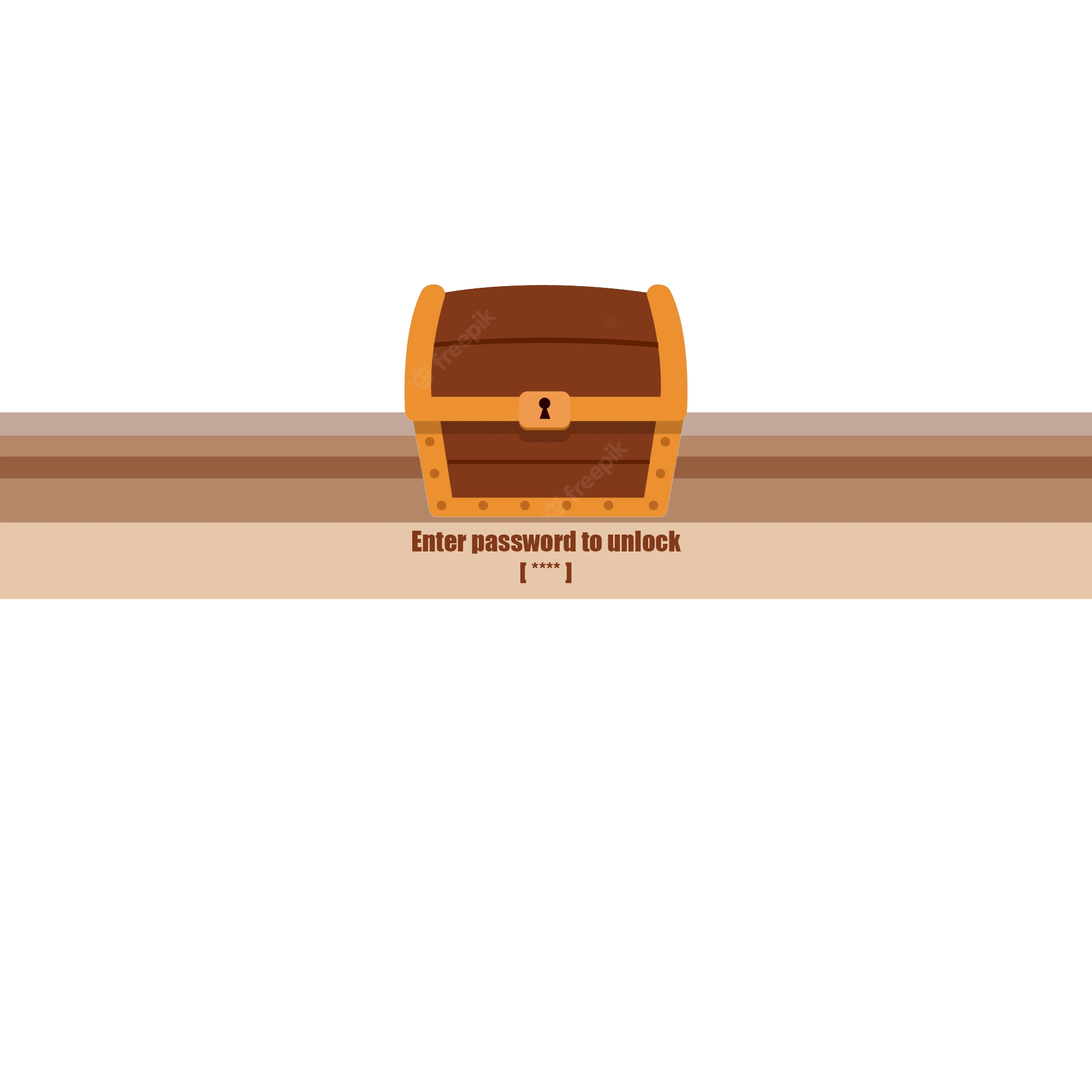
<style>
.page{position:relative;width:1092px;height:1092px;background:#ffffff}
.page>*{position:absolute;margin:0}
.t1{font:26.2px "Impact";color:#823919}
</style>
<div class="page">
<p class="t1" style="left:412px;top:531px;width:269px;height:52px;text-align:center">Enter password to unlock<br>[ **** ]</p>
</div>
